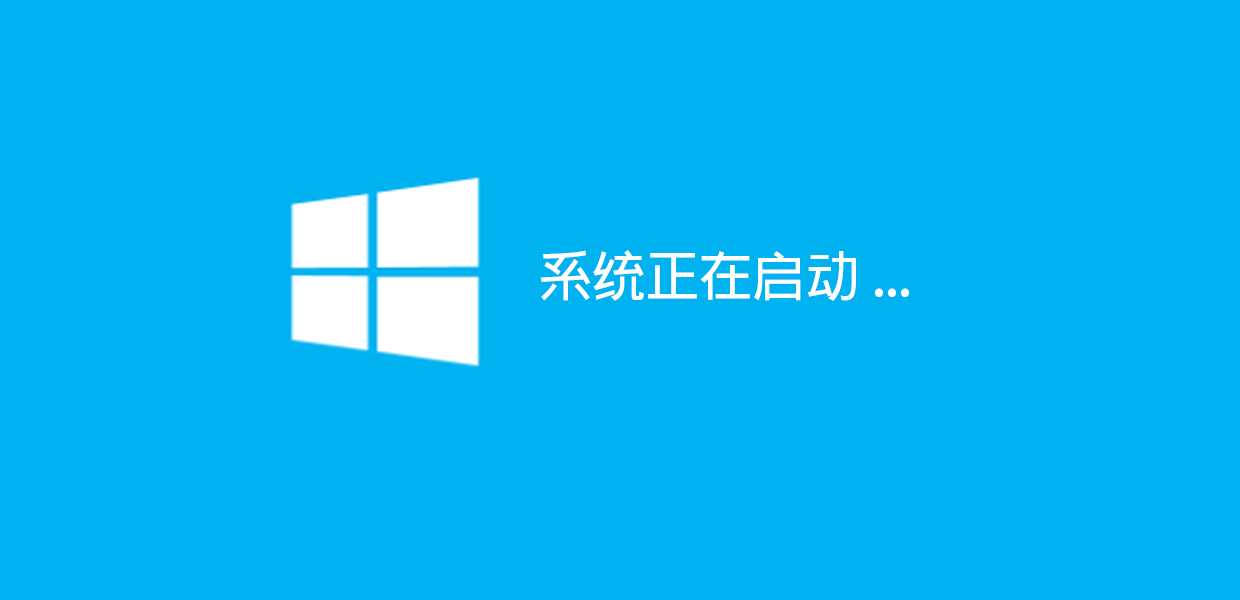
<style>
.page{position:relative;width:1240px;height:600px;background:#00b2f0}
.page>*{position:absolute;margin:0}
.t1{font:53.3px "AdobeFanHeitiStd-Bold";color:#ffffff}
</style>
<div class="page">
<p class="t1" style="left:540px;top:250px;width:369px;height:51px">系统正在启动...</p>
</div>
